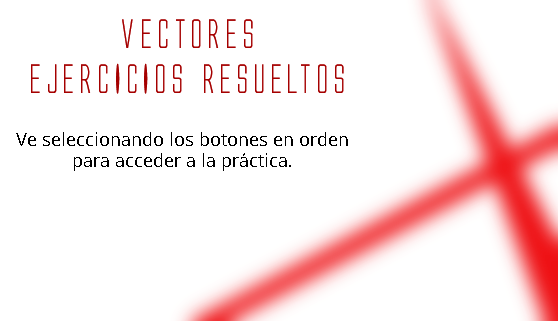
<style>
.page{position:relative;width:558px;height:321px;background:#ffffff}
.page>*{position:absolute;margin:0}
.t1{font:37.5px "AlienLeague";color:#a50000}
.t2{font:18px "OpenSans-Regular";color:#000000}
</style>
<div class="page">
<p class="t1" style="left:31px;top:19px;width:313px;height:75px;text-align:center">VECTORES<br>EJERCICIOS RESUELTOS</p>
<p class="t2" style="left:16px;top:132px;width:332px;height:39px;text-align:center">Ve seleccionando los botones en orden para acceder a la práctica.</p>
</div>
